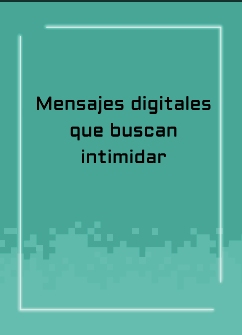
<style>
.page{position:relative;width:242px;height:335px;background:#47a696}
.page>*{position:absolute;margin:0}
.t1{font:18.7px/26.7px "Aldrich-Regular";letter-spacing:0.005em;color:#000000}
</style>
<div class="page">
<p class="t1" style="left:37px;top:96px;width:174px;height:68px;text-align:center">Mensajes digitales<br> que buscan <br>intimidar</p>
</div>
